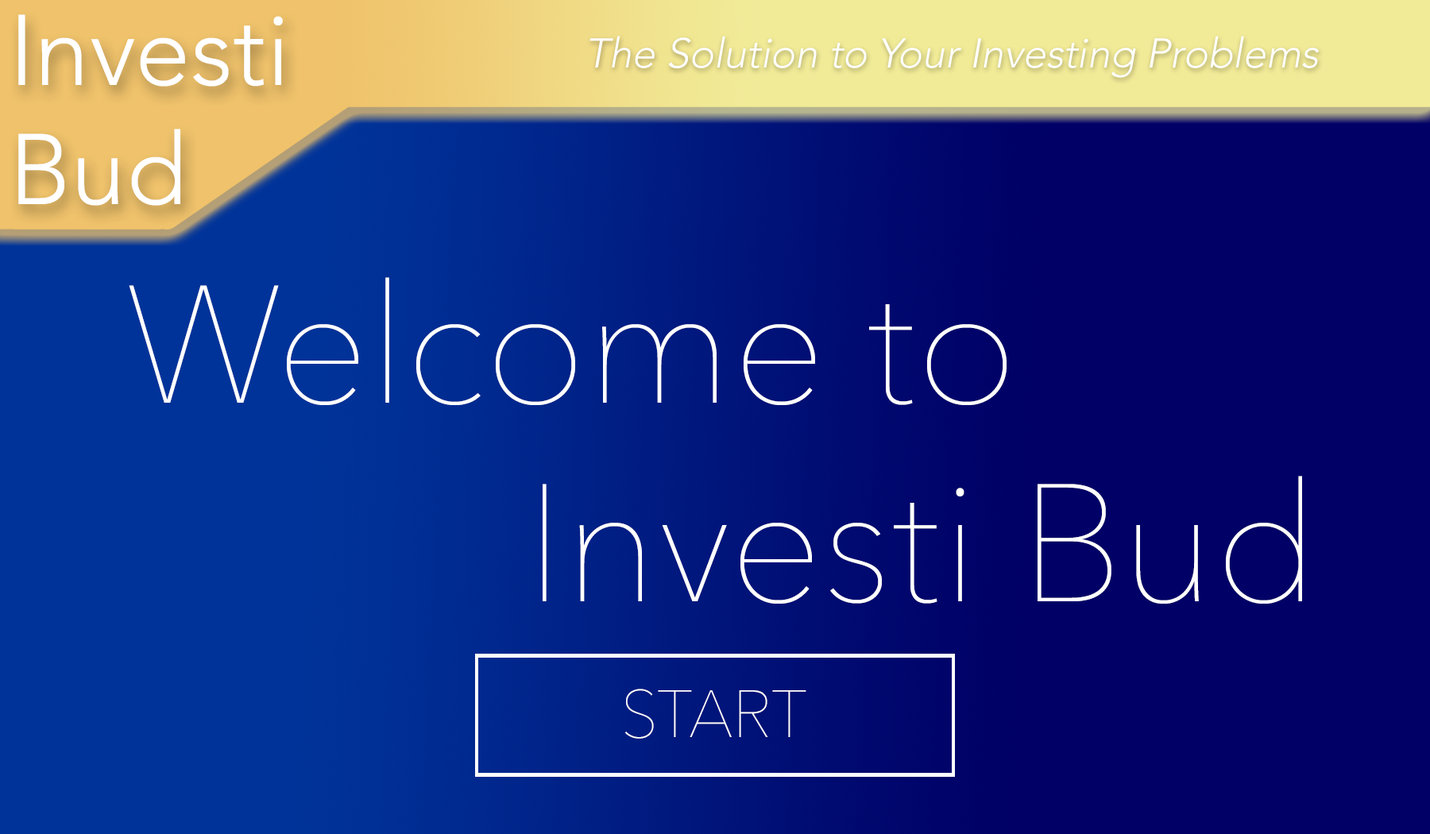
<style>
.page{position:relative;width:1430px;height:834px;background:#000066}
.page>*{position:absolute;margin:0}
.t1{font:99.3px "Avenir-Light";color:#ffffff}
.t2{font:41.4px "Avenir-Light";color:#ffffff;font-style:italic}
.t3{font:165.5px "AvenirNext-UltraLight";color:#ffffff}
.t4{font:66.2px "AvenirNext-UltraLight";color:#ffffff}
</style>
<div class="page">
<p class="t1" style="left:18px;top:14px;width:265px;height:192px">Investi<br>Bud</p>
<p class="t2" style="left:589px;top:36px;width:730px;height:42px">The Solution to Your Investing Problems</p>
<p class="t3" style="left:129px;top:277px;width:1173px;height:327px">Welcome to<br>              Investi Bud</p>
<p class="t4" style="left:624px;top:689px;width:182px;height:50px">START</p>
</div>
